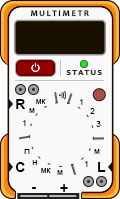
<style>
.page{position:relative;width:120px;height:199px;background:#f9f9f9}
.page>*{position:absolute;margin:0}
.t1{font:8.4px "Candara-Bold";letter-spacing:0.2em;color:#000000;text-transform:uppercase}
.t2{font:10px "Corbel-Bold";letter-spacing:0.1em;color:#282828;font-variant:small-caps}
.t3{font:14px "Arial-BoldMT";letter-spacing:0.2em;color:#000000;text-transform:uppercase}
.t4{font:8px "ArialMT";color:#000000;font-variant:small-caps}
.t5{font:8px "ArialMT";letter-spacing:0.2em;text-transform:uppercase}
.t6{font:8px "ArialMT";letter-spacing:0.2em;color:#000000;font-variant:small-caps}
.t7{font:8px "ArialMT";letter-spacing:0.2em;color:#000000;text-transform:uppercase}
.t8{font:10px "ArialMT";color:#000000;font-variant:small-caps}
.t9{font:18px "Candara-Bold";letter-spacing:0.2em;color:#000000;text-transform:uppercase}
</style>
<div class="page">
<p class="t1" style="left:30px;top:10px;width:59px;height:7px">MULTIMETR</p>
<p class="t2" style="left:66px;top:70px;width:36px;height:5px">status</p>
<p class="t3" style="left:16px;top:99px;width:10px;height:10px">R</p>
<p class="t4" style="left:36px;top:99px;width:10px;height:5px">мк</p>
<p class="t5" style="left:80px;top:99px;width:3px;height:6px">1</p>
<p class="t6" style="left:29px;top:108px;width:6px;height:5px">м</p>
<p class="t7" style="left:90px;top:108px;width:5px;height:6px">2</p>
<p class="t5" style="left:23px;top:120px;width:3px;height:6px">1</p>
<p class="t7" style="left:96px;top:121px;width:5px;height:6px">3</p>
<p class="t8" style="left:24px;top:149px;width:6px;height:5px">п</p>
<p class="t6" style="left:94px;top:149px;width:6px;height:5px">м</p>
<p class="t4" style="left:32px;top:160px;width:5px;height:5px">н</p>
<p class="t5" style="left:85px;top:161px;width:3px;height:6px">1</p>
<p class="t3" style="left:15px;top:162px;width:10px;height:10px">C</p>
<p class="t4" style="left:41px;top:168px;width:10px;height:5px">мк</p>
<p class="t6" style="left:57px;top:170px;width:6px;height:5px">м</p>
<p class="t3" style="left:98px;top:162px;width:8px;height:10px">L</p>
<p class="t9" style="left:60px;top:184px;width:8px;height:8px">+</p>
<p class="t9" style="left:32px;top:187px;width:4px;height:2px">-</p>
</div>
